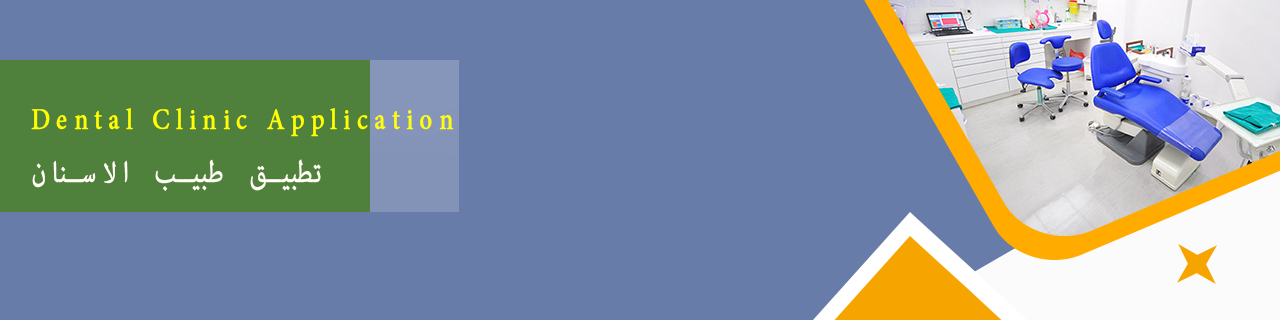
<style>
.page{position:relative;width:1280px;height:320px;background:#677ca9}
.page>*{position:absolute;margin:0}
.t1{font:41.7px "AdobeArabic-Regular";letter-spacing:0.18em;color:#ffff00;font-weight:bold;scale:0.82 1}
.t2{font:41.7px "AdobeArabic-Regular";letter-spacing:0.18em;color:#fffff4;font-weight:bold;scale:0.82 1}
</style>
<div class="page">
<p class="t1" style="left:31px;top:108px;width:423px;height:29px">Dental Clinic Application</p>
<p class="t2" style="left:32px;top:159px;width:289px;height:32px">تطبيق طبيب الاسنان</p>
</div>
